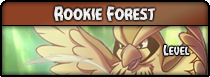
<style>
.page{position:relative;width:210px;height:77px}
.page>*{position:absolute;margin:0}
.t1{font:15.5px "VampireBride";color:#eeeeee}
.t2{font:16.9px "VampireBride";color:#eeeeee}
</style>
<div class="page">
<p class="t1" style="left:54px;top:6px;width:101px;height:15px"><span class="t2">R</span>ookie <span class="t2">F</span>orest</p>
</div>
